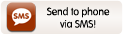
<style>
.page{position:relative;width:123px;height:35px}
.page>*{position:absolute;margin:0}
.t1{font:10.3px "VAGRoundedStd-Thin";color:#000000}
</style>
<div class="page">
<p class="t1" style="left:47px;top:7px;width:63px;height:21px;text-align:center">Send to phone<br>via SMS!</p>
</div>
